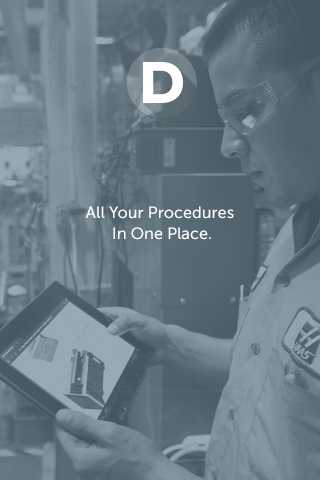
<style>
.page{position:relative;width:320px;height:480px}
.page>*{position:absolute;margin:0}
.t1{font:16.3px/20.9px "MuseoSans-500";color:#ffffff}
</style>
<div class="page">
<p class="t1" style="left:85px;top:206px;width:149px;height:34px;text-align:center">All Your Procedures <br>In One Place.</p>
</div>
